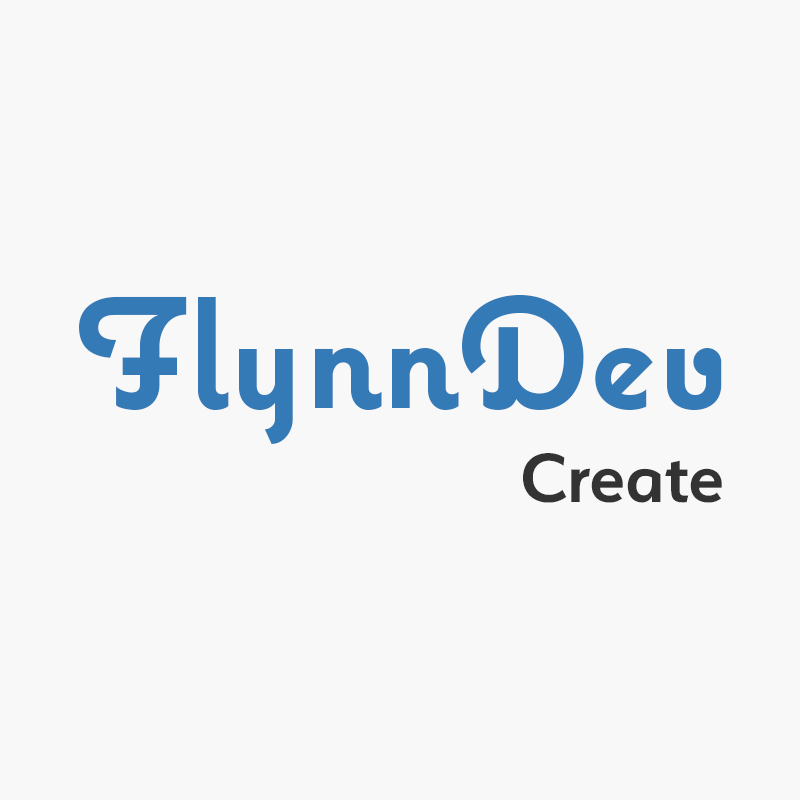
<style>
.page{position:relative;width:800px;height:800px;background:#f8f8f8}
.page>*{position:absolute;margin:0}
.t1{font:156px "Coquette-Bold";color:#337ab7}
.t2{font:78px "Serenity-DemiBold";color:#333333}
</style>
<div class="page">
<p class="t1" style="left:79px;top:294px;width:643px;height:150px">FlynnDev</p>
<p class="t2" style="left:523px;top:453px;width:199px;height:50px">Create</p>
</div>
